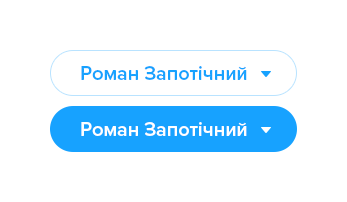
<style>
.page{position:relative;width:347px;height:202px;background:#ffffff}
.page>*{position:absolute;margin:0}
.t1{font:20px "ProximaNova-Semibold";color:#17a2ff}
.t2{font:20px "ProximaNova-Semibold";color:#ffffff}
</style>
<div class="page">
<p class="t1" style="left:81px;top:66px;width:166px;height:14px">Роман Запотічний</p>
<p class="t2" style="left:81px;top:122px;width:166px;height:14px">Роман Запотічний</p>
</div>
